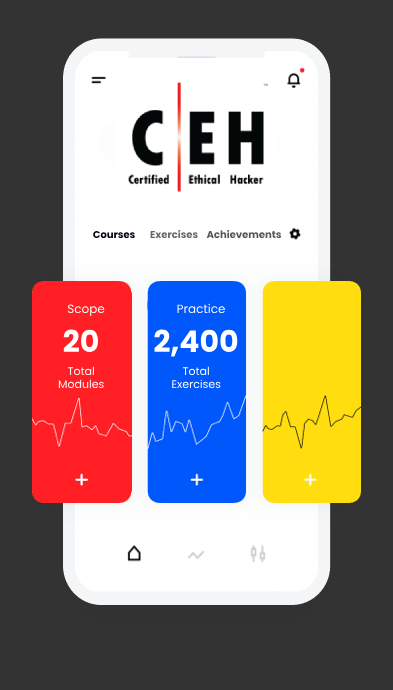
<style>
.page{position:relative;width:393px;height:690px;background:#333333}
.page>*{position:absolute;margin:0}
.t1{font:10px "Poppins-Bold";color:#030318}
.t2{font:10px "Poppins-Bold";color:#68686b}
.t3{font:10px "Poppins-Bold";color:#565657}
.t4{font:12px "Poppins-Regular";color:#fcfdfd}
.t5{font:30px "Poppins-Bold";color:#ffffff}
.t6{font:11px "Poppins-Regular";color:#ffffff}
</style>
<div class="page">
<p class="t1" style="left:93px;top:230px;width:42px;height:9px">Courses</p>
<p class="t2" style="left:150px;top:229px;width:48px;height:10px">Exercises</p>
<p class="t3" style="left:206px;top:229px;width:75px;height:10px">Achievements</p>
<p class="t4" style="left:67px;top:304px;width:38px;height:13px">Scope</p>
<p class="t4" style="left:177px;top:303px;width:48px;height:11px">Practice</p>
<p class="t5" style="left:63px;top:329px;width:35px;height:23px">20</p>
<p class="t5" style="left:154px;top:329px;width:84px;height:28px">2,400</p>
<p class="t6" style="left:58px;top:366px;width:46px;height:23px;text-align:center">Total<br>Modules</p>
<p class="t6" style="left:172px;top:366px;width:49px;height:23px;text-align:center">Total<br>Exercises</p>
</div>
